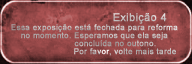
<style>
.page{position:relative;width:192px;height:64px}
.page>*{position:absolute;margin:0}
.t1{font:10.7px "ArialMT";letter-spacing:0.02em;color:#c5bebe;font-weight:bold}
.t2{font:8px/24px "ArialMT";letter-spacing:0.02em;color:#bab5b5;font-weight:bold}
.t3{font:8px/8px "ArialMT";letter-spacing:0.02em;color:#bab5b5;font-weight:bold}
.t4{font:8px "ArialMT";letter-spacing:0.02em;color:#aaa3a3;font-weight:bold}
.t5{font:8px "ArialMT";letter-spacing:0.02em;color:#b7b2b2;font-weight:bold}
</style>
<div class="page">
<p class="t1" style="left:113px;top:13px;width:54px;height:11px">Exibição 4</p>
<p class="t2" style="left:11px;top:24px;width:167px;height:16px;text-align:center">Essa exposição está fechada para reforma<br><span class="t3">no momento. Esperamos que ela seja</span></p>
<p class="t4" style="left:74px;top:40px;width:82px;height:7px">concluída no outono.</p>
<p class="t5" style="left:74px;top:48px;width:102px;height:8px">Por favor, volte mais tarde</p>
</div>
